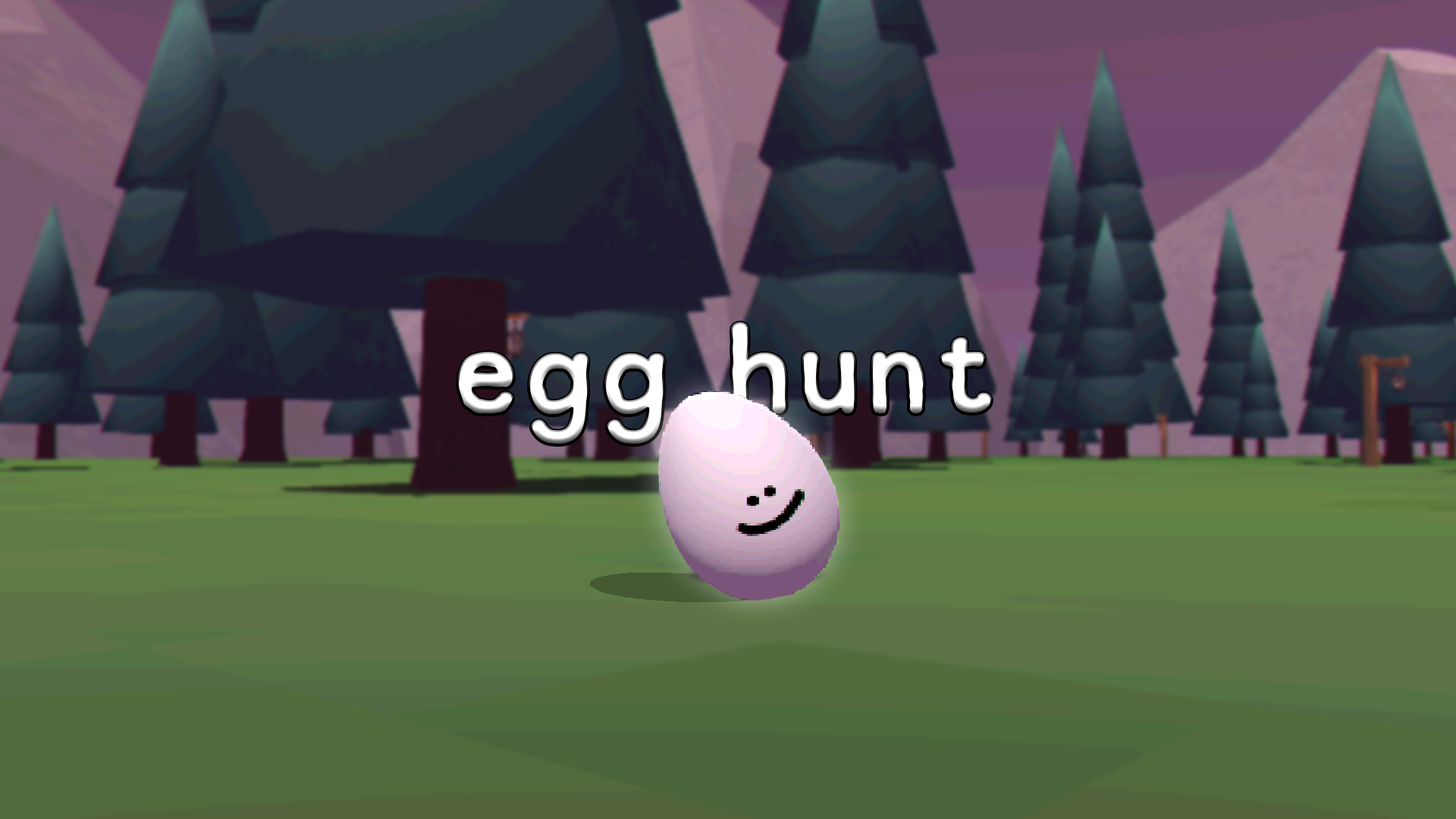
<style>
.page{position:relative;width:1456px;height:819px}
.page>*{position:absolute;margin:0}
.t1{font:121.5px "ThirtySans-Bold";letter-spacing:0.05em}
</style>
<div class="page">
<p class="t1" style="left:457px;top:322px;width:535px;height:123px">egg hunt</p>
</div>
